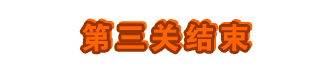
<style>
.page{position:relative;width:331px;height:74px;background:#ffffff}
.page>*{position:absolute;margin:0}
.t1{font:30px "Jdahei";letter-spacing:0.15em;color:#ff6400}
</style>
<div class="page">
<p class="t1" style="left:82px;top:23px;width:166px;height:29px">第三关结束</p>
</div>
